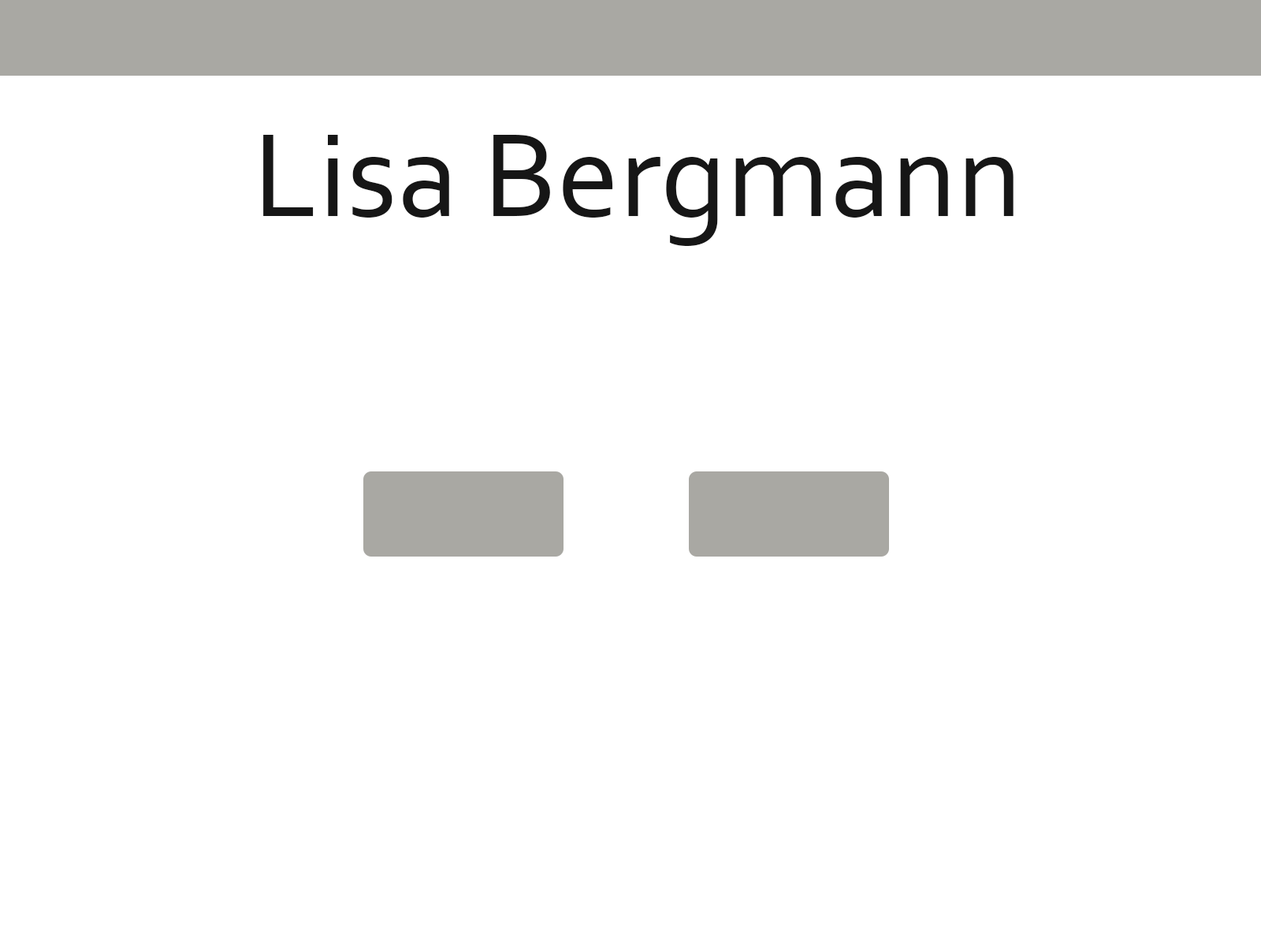
<style>
.page{position:relative;width:1261px;height:946px;background:#ffffff}
.page>*{position:absolute;margin:0}
.t1{font:124.5px "Corbel";color:#161616}
</style>
<div class="page">
<p class="t1" style="left:263px;top:135px;width:750px;height:111px">Lisa Bergmann</p>
</div>
